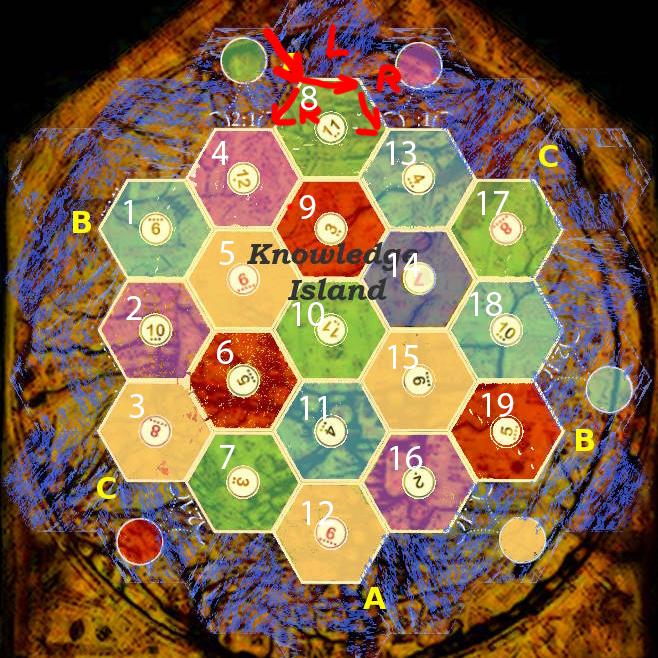
<style>
.page{position:relative;width:658px;height:658px}
.page>*{position:absolute;margin:0}
.t1{font:36px "MyriadPro-Regular";color:#ffffff}
</style>
<div class="page">
<p class="t1" style="left:301px;top:86px;width:17px;height:24px">8</p>
<p class="t1" style="left:211px;top:141px;width:18px;height:24px">4</p>
<p class="t1" style="left:386px;top:141px;width:30px;height:24px">13</p>
<p class="t1" style="left:299px;top:195px;width:17px;height:24px">9</p>
<p class="t1" style="left:477px;top:191px;width:32px;height:24px">17</p>
<p class="t1" style="left:124px;top:200px;width:8px;height:24px">1</p>
<p class="t1" style="left:219px;top:241px;width:15px;height:24px">5</p>
<p class="t1" style="left:388px;top:253px;width:33px;height:24px">14</p>
<p class="t1" style="left:470px;top:292px;width:33px;height:24px">18</p>
<p class="t1" style="left:126px;top:296px;width:16px;height:24px">2</p>
<p class="t1" style="left:292px;top:302px;width:33px;height:24px">10</p>
<p class="t1" style="left:217px;top:340px;width:17px;height:24px">6</p>
<p class="t1" style="left:388px;top:345px;width:30px;height:24px">15</p>
<p class="t1" style="left:129px;top:394px;width:15px;height:24px">3</p>
<p class="t1" style="left:300px;top:396px;width:26px;height:24px">11</p>
<p class="t1" style="left:482px;top:393px;width:32px;height:24px">19</p>
<p class="t1" style="left:220px;top:445px;width:15px;height:24px">7</p>
<p class="t1" style="left:390px;top:446px;width:33px;height:24px">16</p>
<p class="t1" style="left:302px;top:501px;width:32px;height:24px">12</p>
</div>
